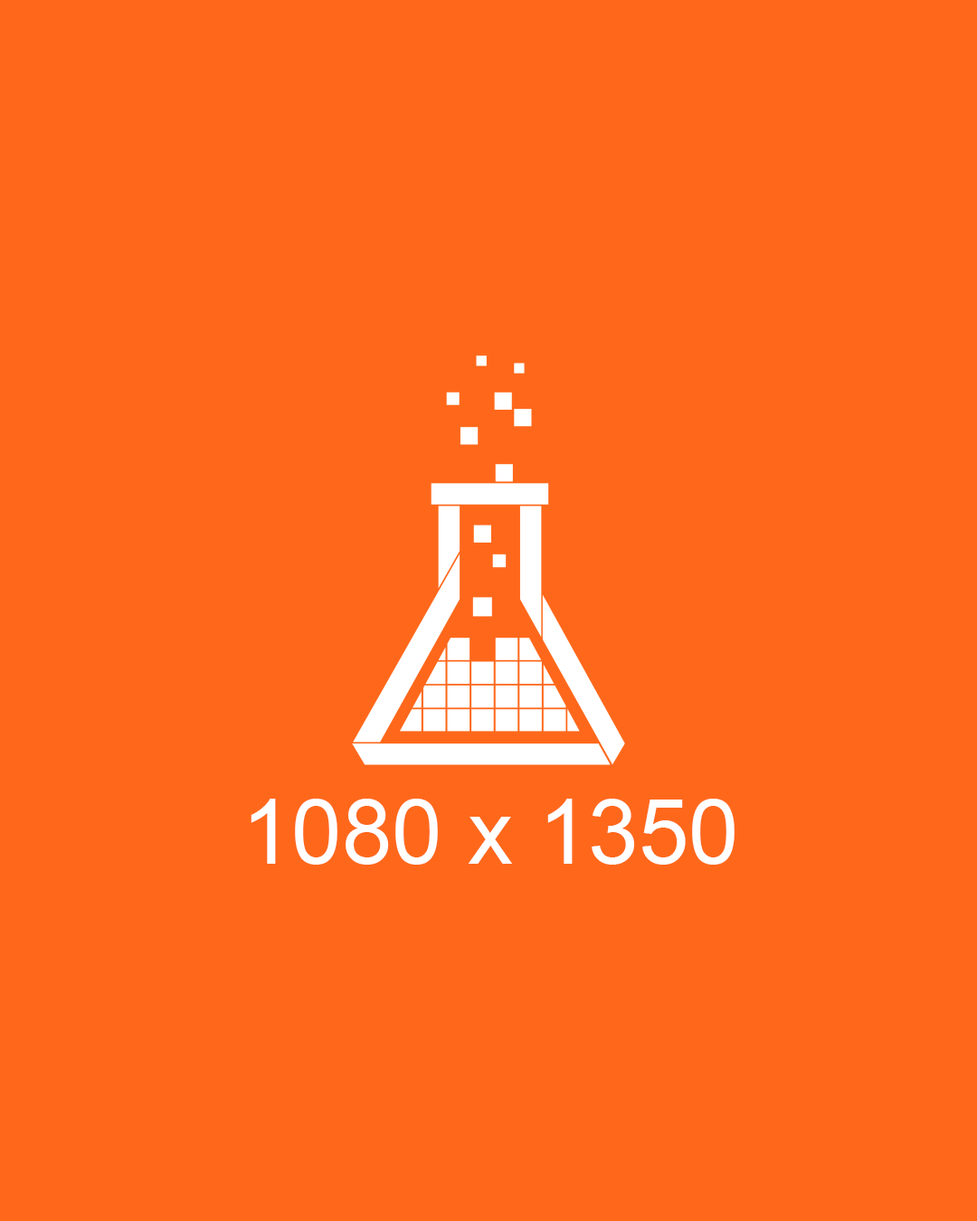
<style>
.page{position:relative;width:977px;height:1221px;background:#ff681b}
.page>*{position:absolute;margin:0}
.t1{font:90.4px "ArialMT";color:#ffffff}
</style>
<div class="page">
<p class="t1" style="left:251px;top:799px;width:483px;height:66px">1080 x 1350</p>
</div>
